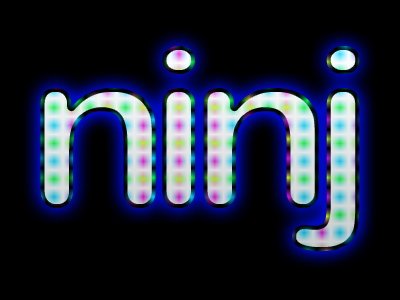
<style>
.page{position:relative;width:400px;height:300px;background:#000000}
.page>*{position:absolute;margin:0}
.t1{font:220px "ArialRoundedMTBold";letter-spacing:-0.1em;scale:1.1 1}
</style>
<div class="page">
<p class="t1" style="left:40px;top:46px;width:320px;height:205px">ninj</p>
</div>
